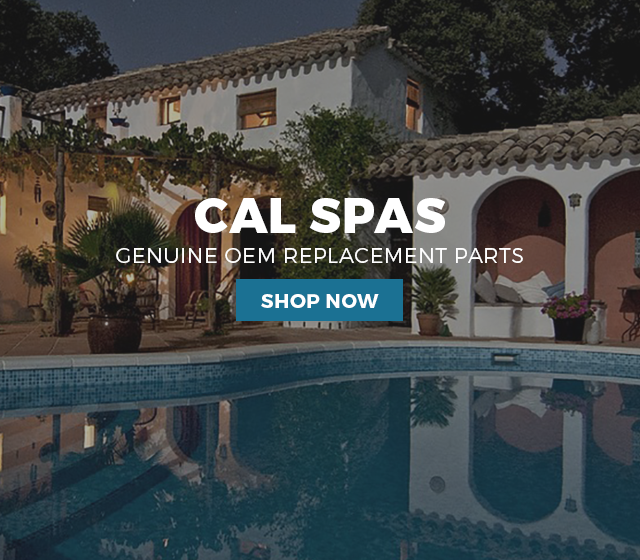
<style>
.page{position:relative;width:640px;height:560px}
.page>*{position:absolute;margin:0}
.t1{font:48.9px "Montserrat-ExtraBold";letter-spacing:0.025em;color:#ffffff}
.t2{font:21.2px "Montserrat-Light";letter-spacing:0.025em;color:#ffffff}
.t3{font:19.8px "Montserrat-Bold";letter-spacing:0.025em;color:#ffffff}
</style>
<div class="page">
<p class="t1" style="left:195px;top:198px;width:250px;height:35px">CAL SPAS</p>
<p class="t2" style="left:116px;top:248px;width:407px;height:15px">GENUINE OEM REPLACEMENT PARTS</p>
<p class="t3" style="left:261px;top:294px;width:118px;height:14px">SHOP NOW</p>
</div>
